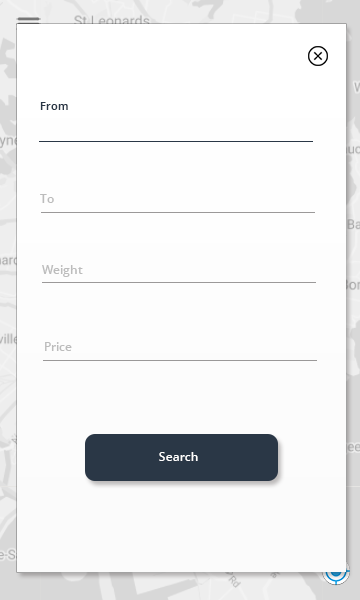
<style>
.page{position:relative;width:360px;height:600px}
.page>*{position:absolute;margin:0}
.t1{font:11px "OpenSans-Semibold";color:#2a3746}
.t2{font:12px "OpenSans-Semibold";color:#bcbcbc}
.t3{font:12px "OpenSans-Semibold";color:#fffefe}
</style>
<div class="page">
<p class="t1" style="left:40px;top:102px;width:28px;height:8px">From</p>
<p class="t2" style="left:40px;top:194px;width:14px;height:9px">To</p>
<p class="t2" style="left:42px;top:265px;width:41px;height:12px">Weight</p>
<p class="t2" style="left:45px;top:342px;width:27px;height:9px">Price</p>
<p class="t3" style="left:159px;top:452px;width:39px;height:9px">Search</p>
</div>
